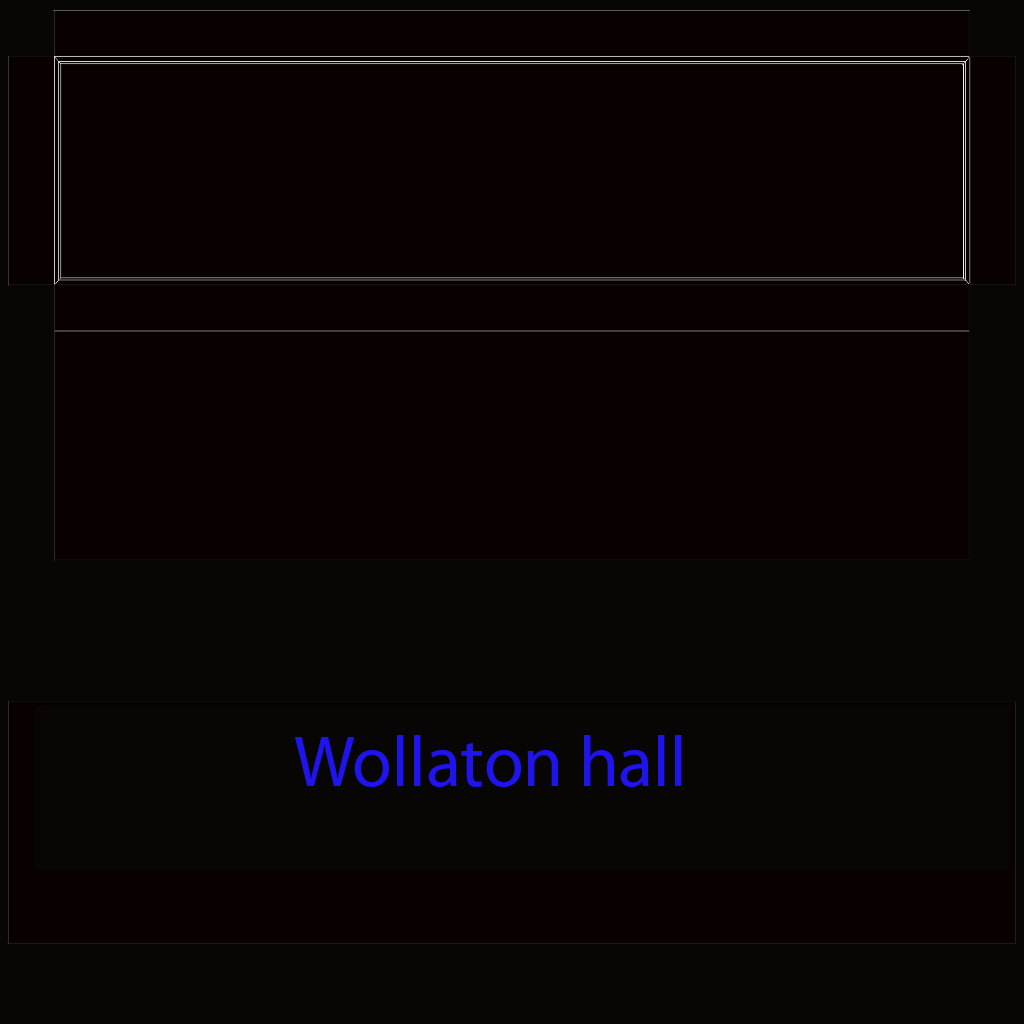
<style>
.page{position:relative;width:1024px;height:1024px;background:#090101}
.page>*{position:absolute;margin:0}
.t1{font:72px "MyriadPro-Regular";color:#1f14eb}
</style>
<div class="page">
<p class="t1" style="left:295px;top:735px;width:387px;height:52px">Wollaton hall</p>
</div>
